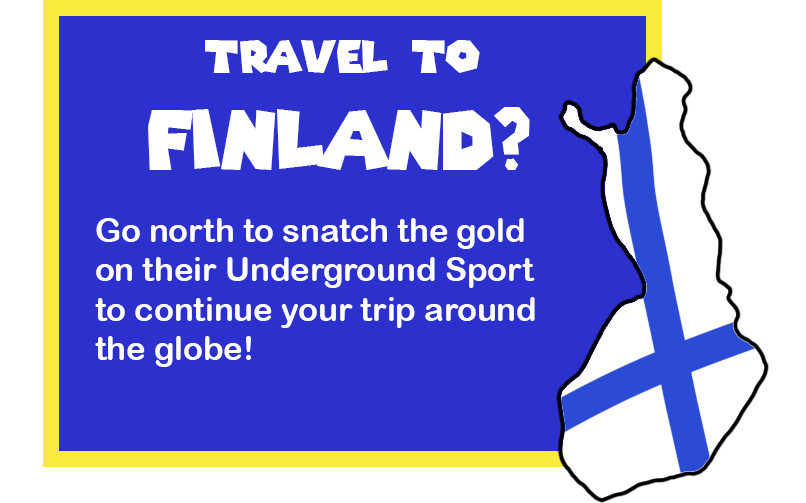
<style>
.page{position:relative;width:806px;height:503px;background:#2c30cd}
.page>*{position:absolute;margin:0}
.t1{font:43.6px "SuperMarioGalaxy";color:#ffffff}
.t2{font:81.1px "SuperMarioGalaxy";color:#ffffff}
.t3{font:32.8px "ArialRoundedMTBold";color:#ffffff}
</style>
<div class="page">
<p class="t1" style="left:148px;top:40px;width:382px;height:130px;text-align:center">Travel to <br><span class="t2">finland?</span></p>
<p class="t3" style="left:95px;top:218px;width:440px;height:149px">Go north to snatch the gold<br>on their Underground Sport <br>to continue your trip around<br>the globe!</p>
</div>
